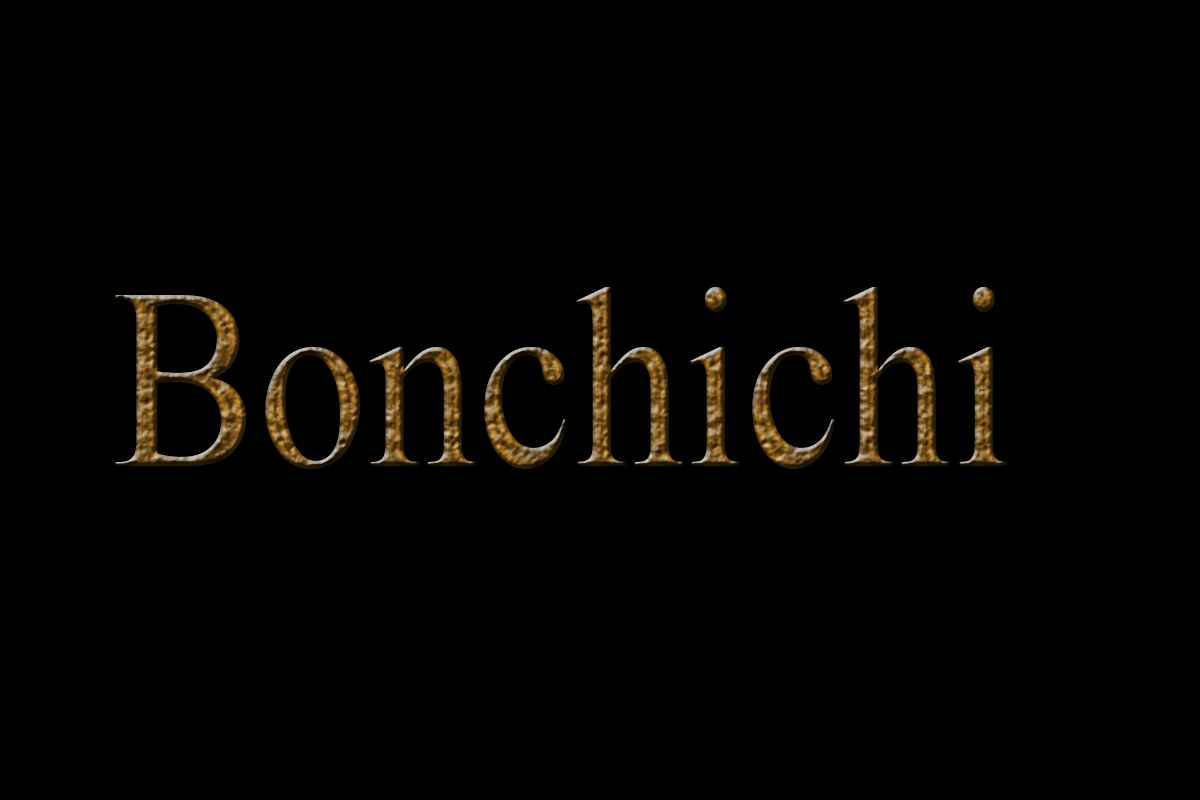
<style>
.page{position:relative;width:1200px;height:800px;background:#000000}
.page>*{position:absolute;margin:0}
.t1{font:257.2px "TimesNewRomanPSMT";scale:0.85 1}
</style>
<div class="page">
<p class="t1" style="left:115px;top:287px;width:893px;height:182px">Bonchichi</p>
</div>
